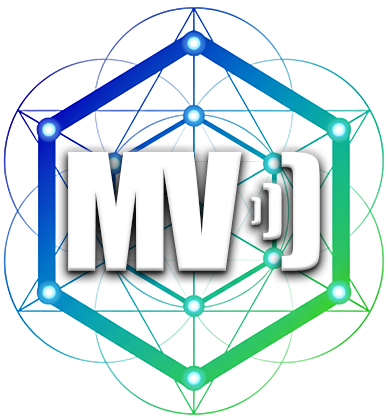
<style>
.page{position:relative;width:388px;height:420px;background:#ffffff}
.page>*{position:absolute;margin:0}
.t1{font:150px "Impact";letter-spacing:-0.05em;color:#ffffff}
</style>
<div class="page">
<p class="t1" style="left:68px;top:152px;width:174px;height:119px">MV</p>
</div>
